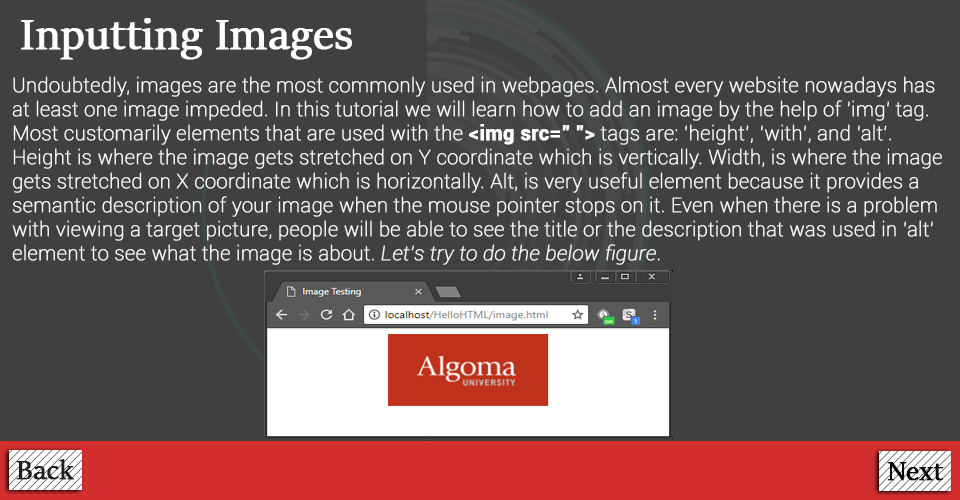
<style>
.page{position:relative;width:960px;height:500px;background:#404042}
.page>*{position:absolute;margin:0}
.t1{font:48px "SitkaBanner";color:#ffffff;font-weight:bold}
.t2{font:20px "Roboto-Thin";color:#ffffff;font-weight:bold}
.t3{font:20px "Roboto-Bold";color:#ffffff;font-weight:bold}
.t4{font:20px "Roboto-ThinItalic";color:#ffffff;font-weight:bold}
.t5{font:30px "SitkaBanner";color:#1e1e1e;font-weight:bold}
.t6{font:30px "SitkaBanner";color:#060606;font-weight:bold}
</style>
<div class="page">
<p class="t1" style="left:21px;top:18px;width:331px;height:42px">Inputting Images</p>
<p class="t2" style="left:12px;top:76px;width:930px;height:189px">Undoubtedly, images are the most commonly used in webpages. Almost every website nowadays has at least one image impeded. In this tutorial we will learn how to add an image by the help of 'img' tag.<br>Most customarily elements that are used with the <span class="t3">&lt;img src=" "&gt;</span> tags are: ‘height’, ‘with’, and ‘alt’. Height is where the image gets stretched on Y coordinate which is vertically. Width, is where the image gets stretched on X coordinate which is horizontally. Alt, is very useful element because it provides a semantic description of your image when the mouse pointer stops on it. Even when there is a problem with viewing a target picture, people will be able to see the title or the description that was used in ‘alt’ element to see what the image is about. <span class="t4">Let’s try to do the below figure</span>.</p>
<p class="t5" style="left:16px;top:459px;width:59px;height:21px">Back</p>
<p class="t6" style="left:887px;top:462px;width:57px;height:19px">Next</p>
</div>
